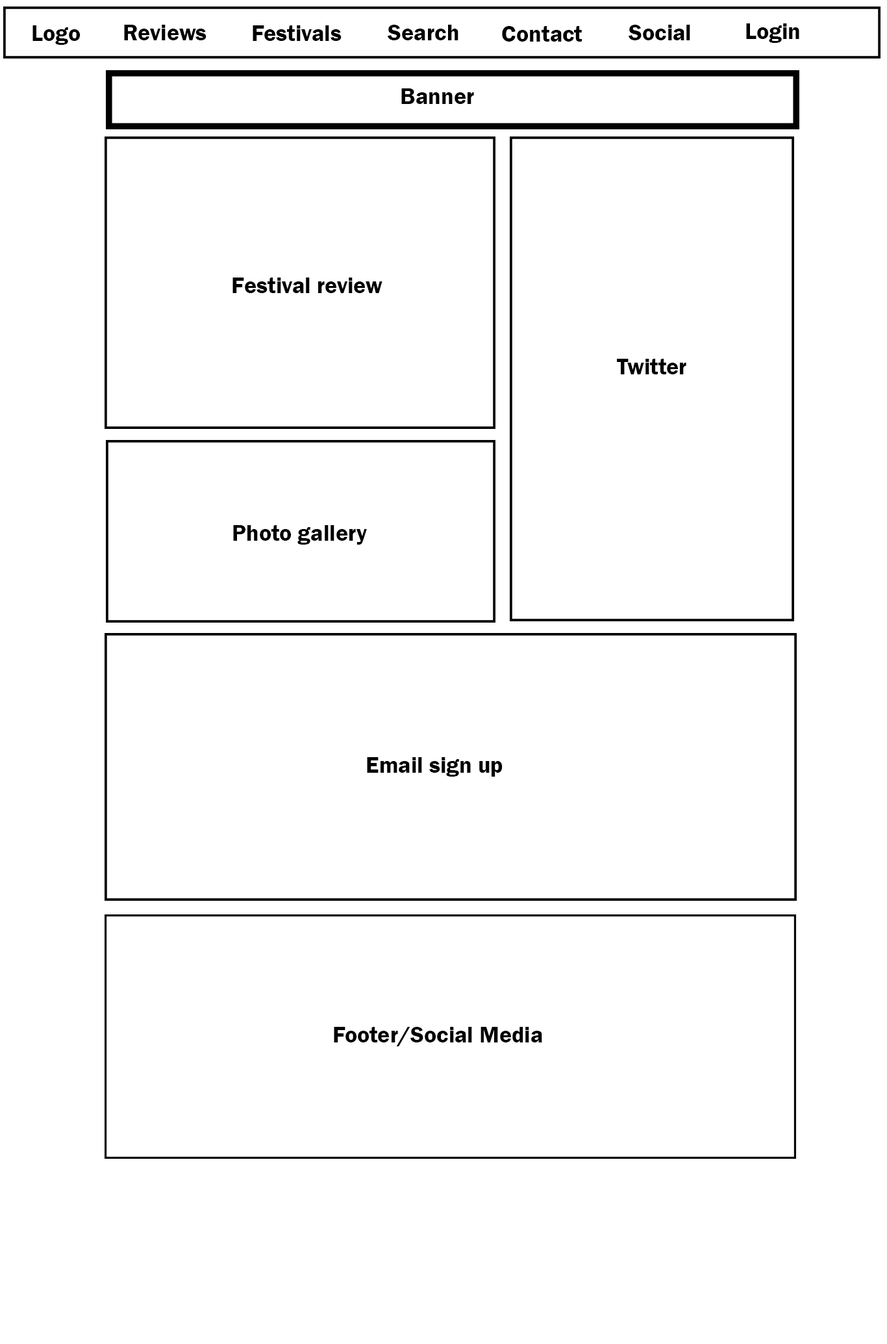
<style>
.page{position:relative;width:887px;height:1344px;background:#ffffff}
.page>*{position:absolute;margin:0}
.t1{font:23.3px "FranklinGothic-Demi";color:#000000}
</style>
<div class="page">
<p class="t1" style="left:32px;top:25px;width:49px;height:20px">Logo</p>
<p class="t1" style="left:124px;top:25px;width:83px;height:15px">Reviews</p>
<p class="t1" style="left:253px;top:25px;width:89px;height:16px">Festivals</p>
<p class="t1" style="left:388px;top:25px;width:71px;height:15px">Search</p>
<p class="t1" style="left:502px;top:26px;width:81px;height:16px">Contact</p>
<p class="t1" style="left:629px;top:25px;width:62px;height:15px">Social</p>
<p class="t1" style="left:747px;top:23px;width:53px;height:20px">Login</p>
<p class="t1" style="left:402px;top:88px;width:72px;height:16px">Banner</p>
<p class="t1" style="left:233px;top:277px;width:150px;height:16px">Festival review</p>
<p class="t1" style="left:617px;top:359px;width:70px;height:15px">Twitter</p>
<p class="t1" style="left:233px;top:525px;width:134px;height:19px">Photo gallery</p>
<p class="t1" style="left:367px;top:757px;width:136px;height:19px">Email sign up</p>
<p class="t1" style="left:334px;top:1027px;width:209px;height:19px">Footer/Social Media</p>
</div>
